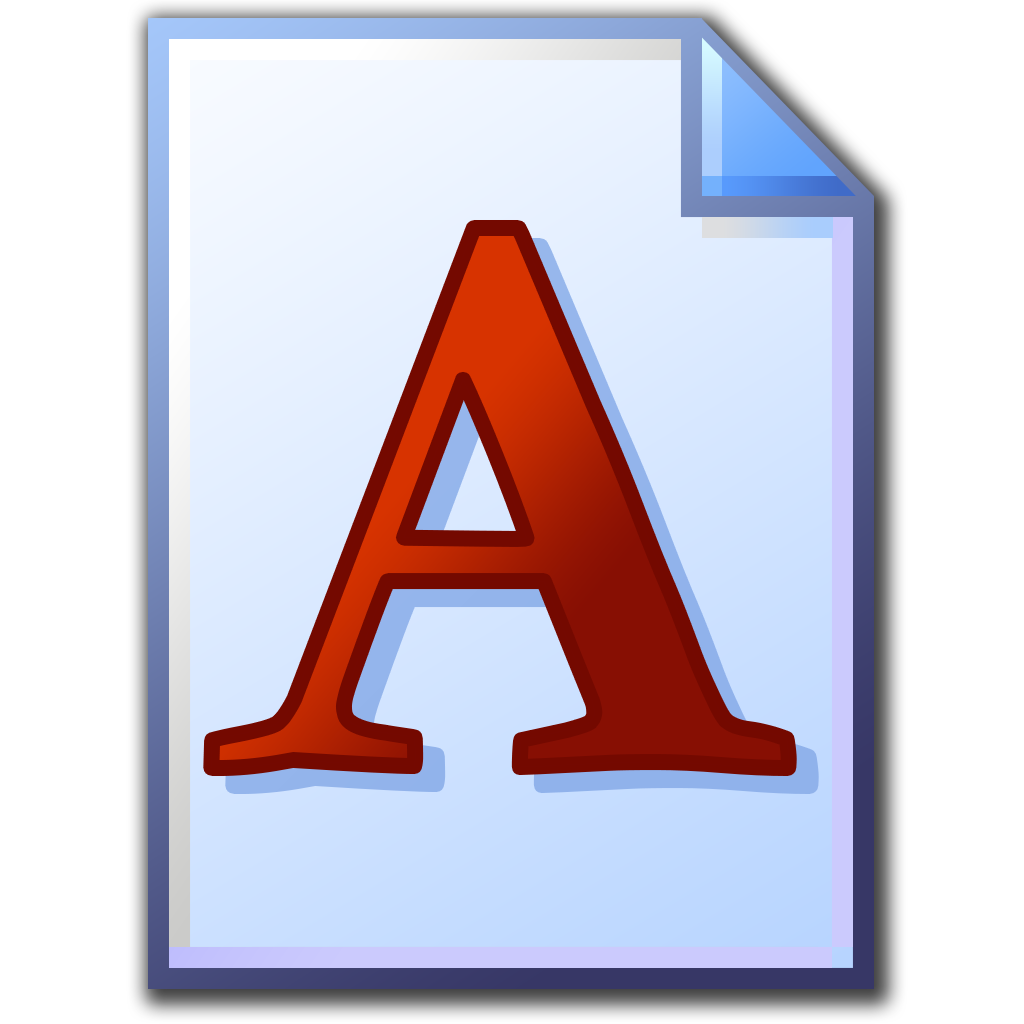
<style>
.page{position:relative;width:1024px;height:1024px;background:#ffffff}
.page>*{position:absolute;margin:0}
.t1{font:837.5px "Garamond-Bold";letter-spacing:-0.025em}
</style>
<div class="page">
<p class="t1" style="left:211px;top:228px;width:578px;height:540px">A</p>
</div>
